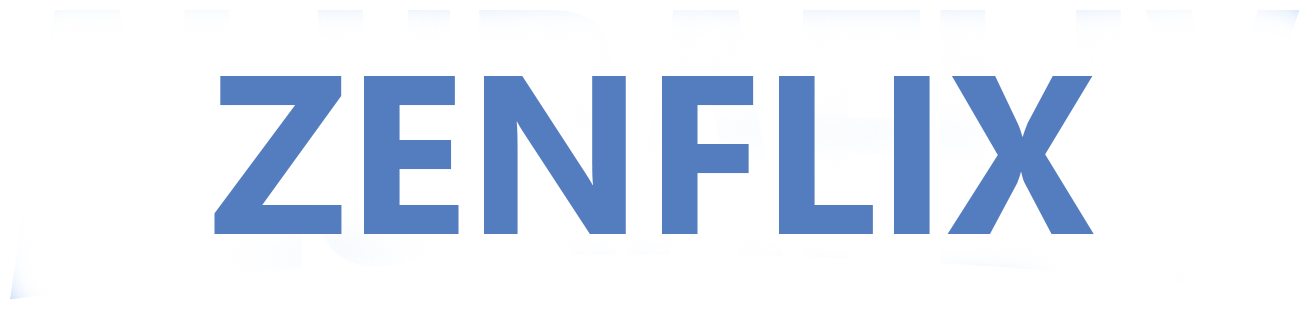
<style>
.page{position:relative;width:1313px;height:312px;background:#ffffff}
.page>*{position:absolute;margin:0}
.t1{font:224.5px "NirmalaUI-Bold";color:#547dbf}
</style>
<div class="page">
<p class="t1" style="left:214px;top:76px;width:880px;height:158px">ZENFLIX</p>
</div>
